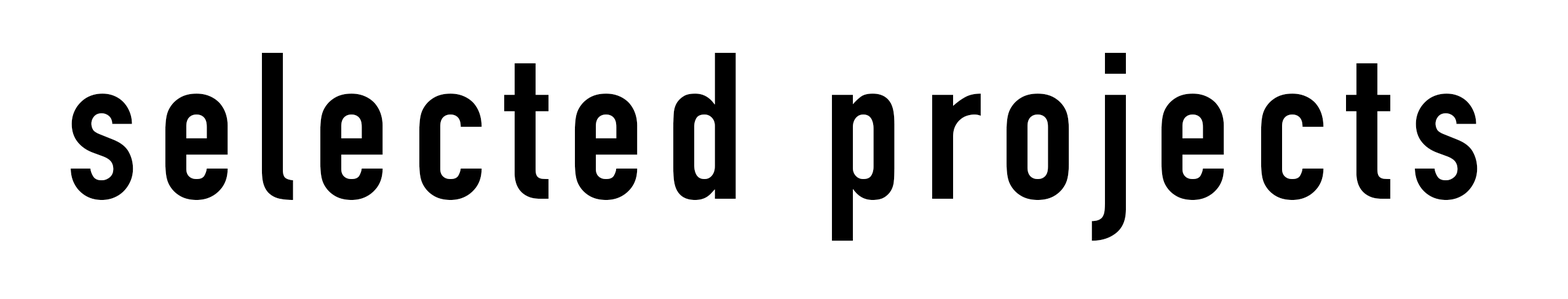
<style>
.page{position:relative;width:1568px;height:299px;background:#ffffff}
.page>*{position:absolute;margin:0}
.t1{font:205px "DINCondensed-Bold";letter-spacing:0.1em;color:#000000}
</style>
<div class="page">
<p class="t1" style="left:70px;top:52px;width:1408px;height:189px">selected projects</p>
</div>
